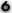
<style>
.page{position:relative;width:12px;height:13px}
.page>*{position:absolute;margin:0}
.t1{font:13.9px "K2D-ExtraBold";color:#000000}
</style>
<div class="page">
<p class="t1" style="left:1px;top:1px;width:9px;height:11px">6</p>
</div>
